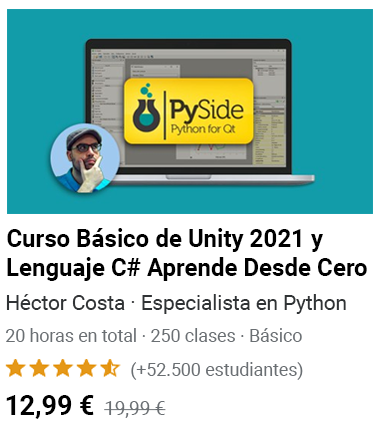
<style>
.page{position:relative;width:380px;height:425px;background:#ffffff}
.page>*{position:absolute;margin:0}
.t1{font:24.7px/28.8px "Roboto-Bold";color:#000000}
.t2{font:20.9px "Roboto-Regular";color:#303335}
.t3{font:18.3px "Roboto-Regular";color:#6a6f73;scale:0.97 1}
.t4{font:18.2px "Roboto-Regular";color:#6a6f73}
.t5{font:27.7px "Roboto-Bold";color:#000000;scale:0.97 1}
.t6{font:19.4px "Roboto-Regular";color:#6a6f73}
</style>
<div class="page">
<p class="t1" style="left:7px;top:228px;width:360px;height:53px">Curso Básico de Unity 2021 y Lenguaje C# Aprende Desde Cero</p>
<p class="t2" style="left:6px;top:294px;width:340px;height:20px">Héctor Costa · Especialista en Python</p>
<p class="t3" style="left:6px;top:328px;width:296px;height:14px">20 horas en total · 250 clases · Básico</p>
<p class="t4" style="left:131px;top:362px;width:172px;height:18px">(+52.500 estudiantes)</p>
<p class="t5" style="left:6px;top:395px;width:88px;height:24px">12,99 €</p>
<p class="t6" style="left:104px;top:401px;width:62px;height:17px">19,99 €</p>
</div>
